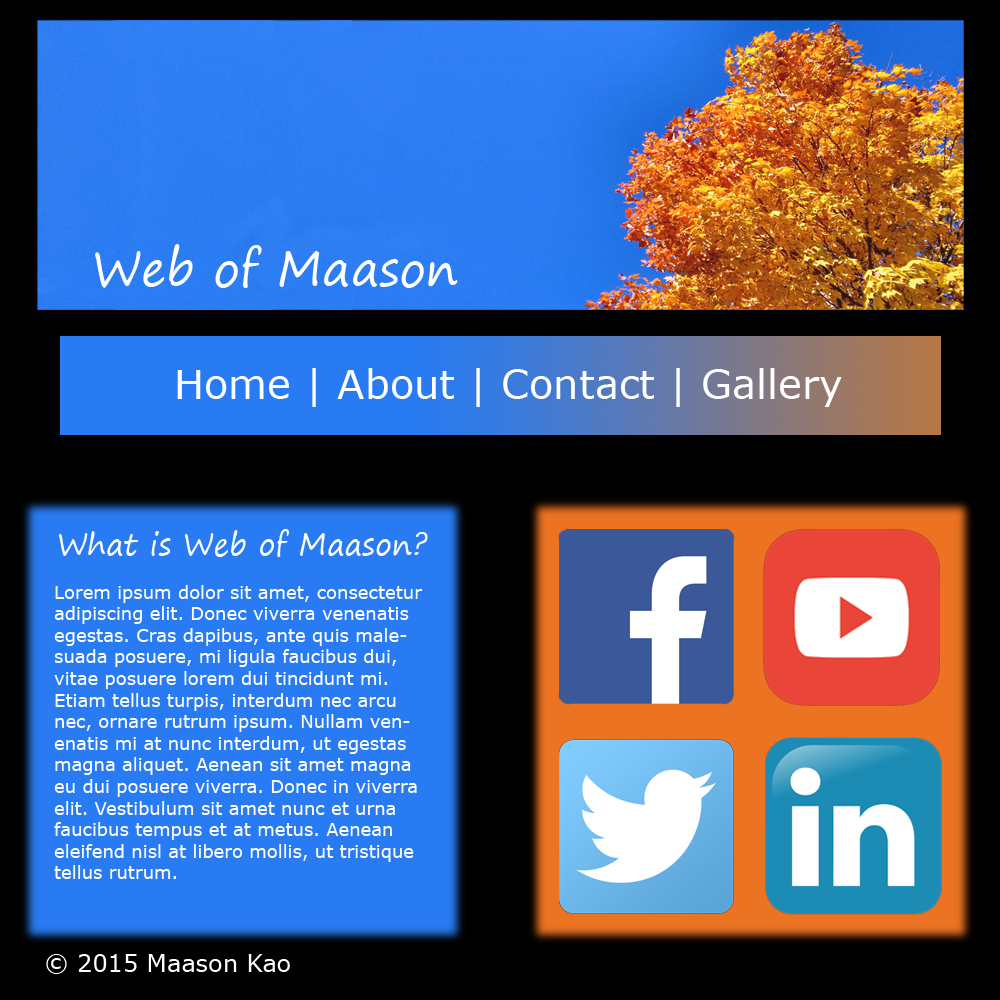
<style>
.page{position:relative;width:1000px;height:1000px;background:#000000}
.page>*{position:absolute;margin:0}
.t1{font:48px "SegoePrint";color:#ffffff}
.t2{font:40px "Verdana";color:#ffffff}
.t3{font:30px "SegoePrint";color:#ffffff}
.t4{font:18px "Verdana";color:#ffffff}
.t5{font:24px "Verdana";color:#ffffff}
</style>
<div class="page">
<p class="t1" style="left:95px;top:244px;width:363px;height:44px">Web of Maason</p>
<p class="t2" style="left:177px;top:368px;width:665px;height:39px">Home | About | Contact | Gallery</p>
<p class="t3" style="left:58px;top:529px;width:370px;height:28px">What is Web of Maason?</p>
<p class="t4" style="left:54px;top:585px;width:369px;height:294px">Lorem ipsum dolor sit amet, consectetur adipiscing elit. Donec viverra venenatis egestas. Cras dapibus, ante quis malesuada posuere, mi ligula faucibus dui, vitae posuere lorem dui tincidunt mi. Etiam tellus turpis, interdum nec arcu nec, ornare rutrum ipsum. Nullam venenatis mi at nunc interdum, ut egestas magna aliquet. Aenean sit amet magna eu dui posuere viverra. Donec in viverra elit. Vestibulum sit amet nunc et urna faucibus tempus et at metus. Aenean eleifend nisl at libero mollis, ut tristique tellus rutrum.</p>
<p class="t5" style="left:46px;top:954px;width:244px;height:20px">© 2015 Maason Kao</p>
</div>
